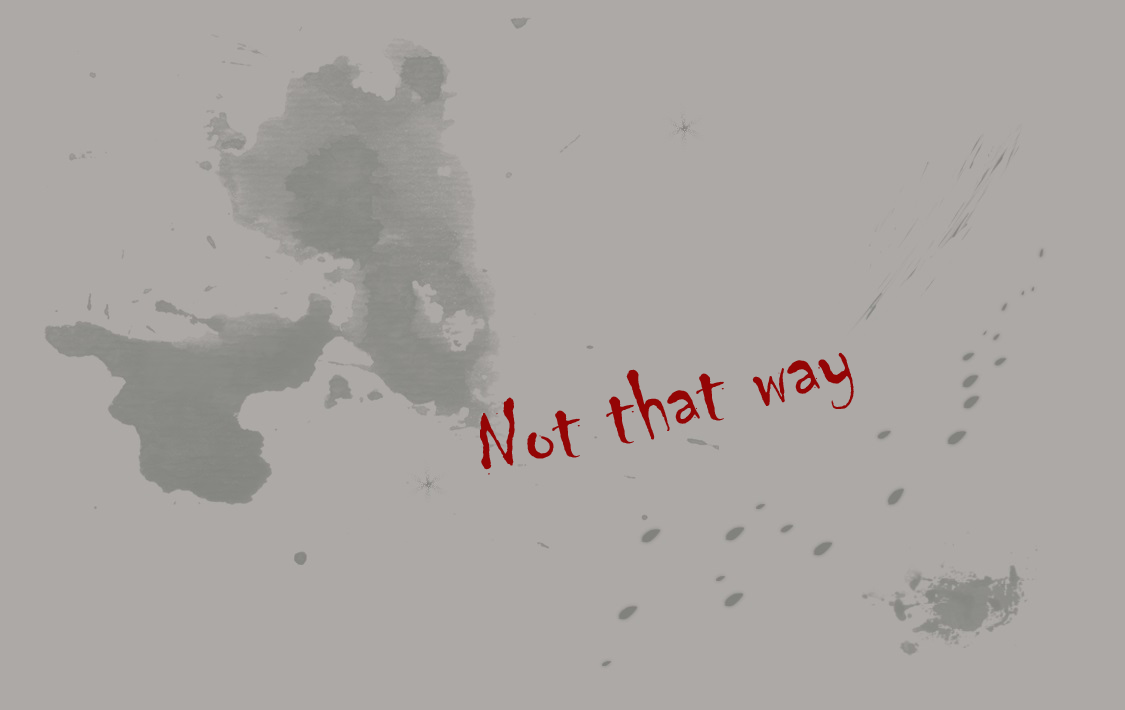
<style>
.page{position:relative;width:1125px;height:710px;background:#ada9a6}
.page>*{position:absolute;margin:0}
.t1{font:101.4px "Chiller-Regular";color:#940505}
</style>
<div class="page">
<p class="t1" style="left:480px;top:352px;width:374px;height:123px;rotate:-14deg">Not that way</p>
</div>
